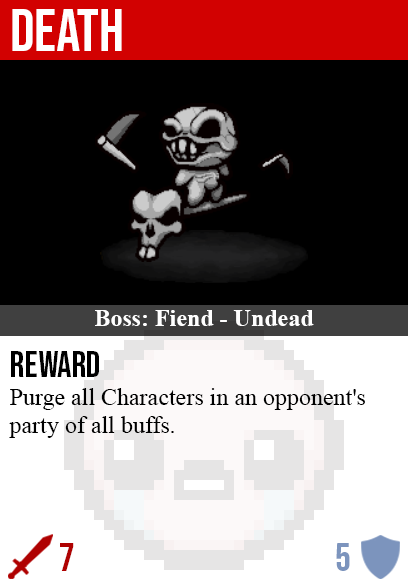
<style>
.page{position:relative;width:408px;height:585px;background:#000000}
.page>*{position:absolute;margin:0}
.t1{font:60px "BebasNeue-Regular";color:#ffffff}
.t2{font:24px "TimesNewRomanPS-BoldMT";color:#ffffff}
.t3{font:36px "BebasNeue-Regular";color:#000000}
.t4{font:24px "TimesNewRomanPSMT";color:#000000}
.t5{font:40px "BebasNeue-Regular";color:#af0202}
.t6{font:40px "BebasNeue-Regular";color:#7c94bd}
</style>
<div class="page">
<p class="t1" style="left:12px;top:9px;width:110px;height:42px">death</p>
<p class="t2" style="left:95px;top:310px;width:219px;height:16px">Boss: Fiend - Undead</p>
<p class="t3" style="left:11px;top:351px;width:88px;height:26px">reward</p>
<p class="t4" style="left:9px;top:388px;width:356px;height:50px">Purge all Characters in an opponent's<br>party of all buffs.</p>
<p class="t5" style="left:60px;top:543px;width:14px;height:28px">7</p>
<p class="t6" style="left:336px;top:543px;width:14px;height:28px">5</p>
</div>
